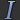
<style>
.page{position:relative;width:20px;height:20px;background:#333333}
.page>*{position:absolute;margin:0}
.t1{font:25px "LucidaBright-Italic";letter-spacing:-0.025em}
</style>
<div class="page">
<p class="t1" style="left:4px;top:1px;width:12px;height:18px">I</p>
</div>
